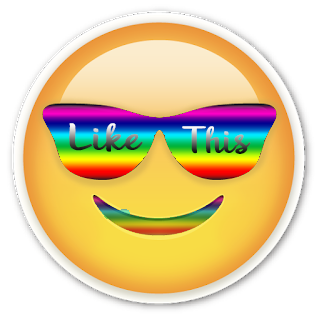
<style>
.page{position:relative;width:319px;height:320px;background:#ffffff}
.page>*{position:absolute;margin:0}
.t1{font:38.8px "Unquestionify";scale:1.45 1}
.t2{font:38.8px "Unquestionify";scale:1.27 1}
</style>
<div class="page">
<p class="t1" style="left:69px;top:123px;width:74px;height:29px">Like</p>
<p class="t2" style="left:182px;top:126px;width:69px;height:28px">This</p>
</div>
